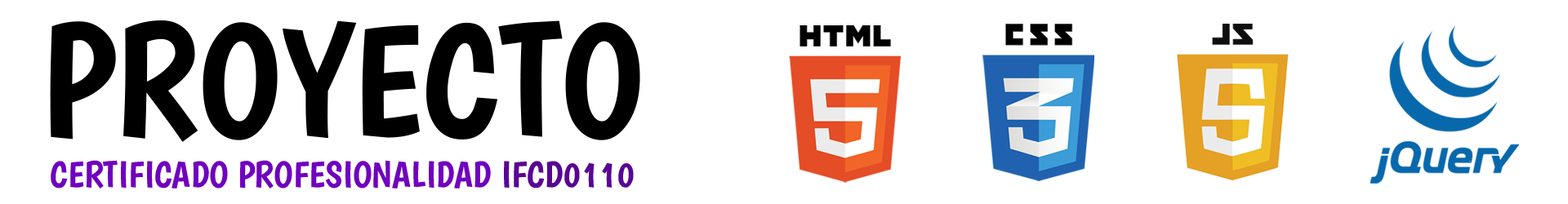
<style>
.page{position:relative;width:1568px;height:204px;background:#ffffff}
.page>*{position:absolute;margin:0}
.t1{font:159.2px "Boogaloo-Regular";color:#000000}
.t2{font:36.7px "Boogaloo-Regular";color:#7000bf}
.t3{font:36.7px "Boogaloo-Regular";color:#590594}
</style>
<div class="page">
<p class="t1" style="left:50px;top:20px;width:590px;height:122px">PROYECTO</p>
<p class="t2" style="left:51px;top:160px;width:583px;height:29px">CERTIFICADO PROFESIONALIDAD <span class="t3">IFCD0110</span></p>
</div>
